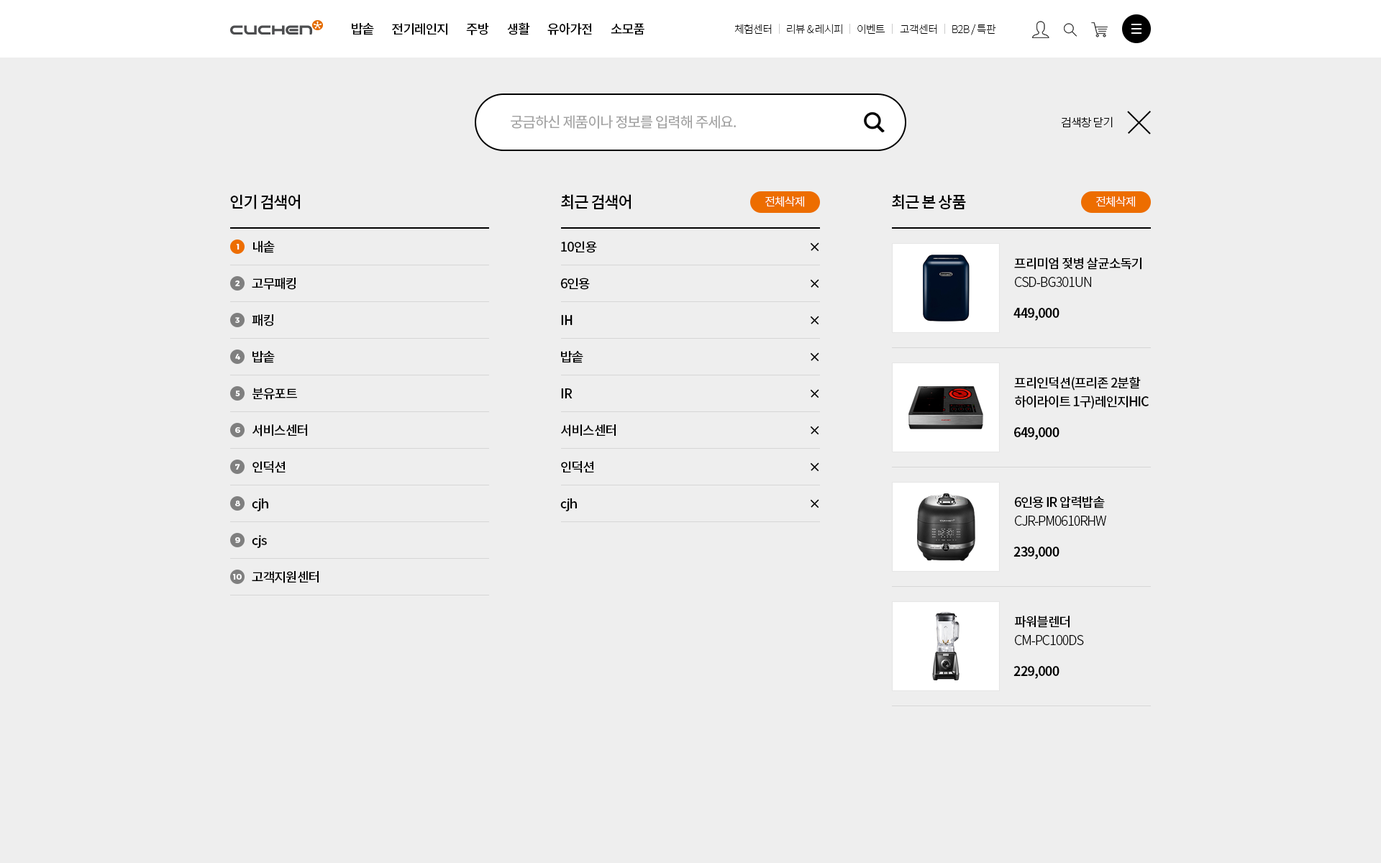
<style>
.page{position:relative;width:1381px;height:863px;background:#eeeeee}
.page>*{position:absolute;margin:0}
.t1{font:12.9px "NotoSansCJKkr-Medium";letter-spacing:-0.05em;color:#000000}
.t2{font:10.8px "NotoSansCJKkr-Thin";letter-spacing:-0.05em;color:#000000}
.t3{font:14.4px "NotoSansCJKkr-Regular";letter-spacing:-0.05em;color:#a3a3a3}
.t4{font:11.5px "NotoSansCJKkr-Light";letter-spacing:-0.05em;color:#000000}
.t5{font:15.8px "NotoSansCJKkr-Medium";letter-spacing:-0.05em;color:#000000}
.t6{font:11.5px "NotoSansCJKkr-Light";letter-spacing:-0.05em;color:#ffffff}
.t7{font:7.9px "Montserrat-Bold";color:#ffffff}
.t8{font:12.9px/18.7px "NotoSansCJKkr-Medium";letter-spacing:-0.05em;color:#000000}
.t9{font:12.9px/18.7px "NotoSansCJKkr-Light";letter-spacing:-0.05em;color:#000000}
.t10{font:12.9px "NotoSansCJKkr-Bold";letter-spacing:-0.05em;color:#000000}
</style>
<div class="page">
<p class="t1" style="left:352px;top:22px;width:293px;height:13px">밥솥        전기레인지        주방        생활        유아가전        소모품</p>
<p class="t2" style="left:735px;top:24px;width:37px;height:11px">체험센터</p>
<p class="t2" style="left:787px;top:24px;width:55px;height:11px">리뷰 &amp; 레시피</p>
<p class="t2" style="left:858px;top:24px;width:27px;height:11px">이벤트</p>
<p class="t2" style="left:900px;top:24px;width:37px;height:11px">고객센터</p>
<p class="t2" style="left:952px;top:24px;width:44px;height:11px">B2B / 특판</p>
<p class="t3" style="left:511px;top:115px;width:225px;height:14px">궁금하신 제품이나 정보를 입력해 주세요.</p>
<p class="t4" style="left:1061px;top:117px;width:52px;height:10px">검색창 닫기</p>
<p class="t5" style="left:230px;top:194px;width:70px;height:15px">인기 검색어</p>
<p class="t5" style="left:561px;top:194px;width:70px;height:15px">최근 검색어</p>
<p class="t6" style="left:765px;top:196px;width:39px;height:11px">전체삭제</p>
<p class="t5" style="left:892px;top:194px;width:74px;height:15px">최근 본 상품</p>
<p class="t6" style="left:1096px;top:196px;width:39px;height:11px">전체삭제</p>
<p class="t7" style="left:237px;top:244px;width:3px;height:6px">1</p>
<p class="t1" style="left:253px;top:241px;width:22px;height:12px">내솥</p>
<p class="t1" style="left:561px;top:241px;width:36px;height:12px">10인용</p>
<p class="t8" style="left:1014px;top:258px;width:128px;height:29px">프리미엄 젖병 살균소독기<br><span class="t9">CSD-BG301UN</span></p>
<p class="t7" style="left:235px;top:281px;width:5px;height:5px">2</p>
<p class="t1" style="left:252px;top:278px;width:44px;height:12px">고무패킹</p>
<p class="t1" style="left:560px;top:278px;width:30px;height:12px">6인용</p>
<p class="t7" style="left:235px;top:317px;width:5px;height:6px">3</p>
<p class="t1" style="left:252px;top:314px;width:21px;height:13px">패킹</p>
<p class="t1" style="left:561px;top:315px;width:12px;height:10px">IH</p>
<p class="t10" style="left:1014px;top:308px;width:46px;height:13px">449,000</p>
<p class="t7" style="left:235px;top:354px;width:5px;height:6px">4</p>
<p class="t1" style="left:253px;top:351px;width:22px;height:12px">밥솥</p>
<p class="t1" style="left:561px;top:351px;width:22px;height:12px">밥솥</p>
<p class="t8" style="left:1014px;top:377px;width:135px;height:32px">프리인덕션(프리존 2분할<br>하이라이트 1구)레인지HIC</p>
<p class="t1" style="left:253px;top:388px;width:44px;height:12px">분유포트</p>
<p class="t1" style="left:561px;top:388px;width:12px;height:11px">IR</p>
<p class="t7" style="left:235px;top:391px;width:5px;height:5px">5</p>
<p class="t1" style="left:253px;top:424px;width:54px;height:13px">서비스센터</p>
<p class="t1" style="left:561px;top:424px;width:55px;height:13px">서비스센터</p>
<p class="t7" style="left:235px;top:427px;width:5px;height:6px">6</p>
<p class="t10" style="left:1014px;top:427px;width:46px;height:13px">649,000</p>
<p class="t1" style="left:253px;top:461px;width:33px;height:12px">인덕션</p>
<p class="t1" style="left:561px;top:461px;width:33px;height:12px">인덕션</p>
<p class="t7" style="left:235px;top:464px;width:5px;height:6px">7</p>
<p class="t1" style="left:252px;top:498px;width:16px;height:13px">cjh</p>
<p class="t1" style="left:560px;top:498px;width:17px;height:13px">cjh</p>
<p class="t9" style="left:1014px;top:496px;width:92px;height:30px"><span class="t8">6인용 IR 압력밥솥<br></span>CJR-PM0610RHW</p>
<p class="t7" style="left:235px;top:501px;width:5px;height:5px">8</p>
<p class="t7" style="left:235px;top:537px;width:5px;height:6px">9</p>
<p class="t1" style="left:252px;top:535px;width:15px;height:13px">cjs</p>
<p class="t10" style="left:1014px;top:547px;width:46px;height:13px">239,000</p>
<p class="t7" style="left:233px;top:574px;width:9px;height:6px">10</p>
<p class="t1" style="left:252px;top:571px;width:67px;height:12px">고객지원센터</p>
<p class="t9" style="left:1015px;top:616px;width:69px;height:29px"><span class="t8">파워블렌더<br></span>CM-PC100DS</p>
<p class="t10" style="left:1014px;top:666px;width:46px;height:13px">229,000</p>
</div>
